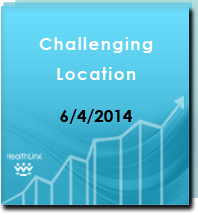
<style>
.page{position:relative;width:198px;height:215px}
.page>*{position:absolute;margin:0}
.t1{font:17px/30px "CenturyGothic-Bold";letter-spacing:0.08em;color:#ffffff}
.t2{font:17px "CenturyGothic-Bold";color:#000000}
</style>
<div class="page">
<p class="t1" style="left:39px;top:37px;width:114px;height:43px;text-align:center">Challenging<br>Location</p>
<p class="t2" style="left:60px;top:109px;width:72px;height:15px">6/4/2014</p>
</div>
